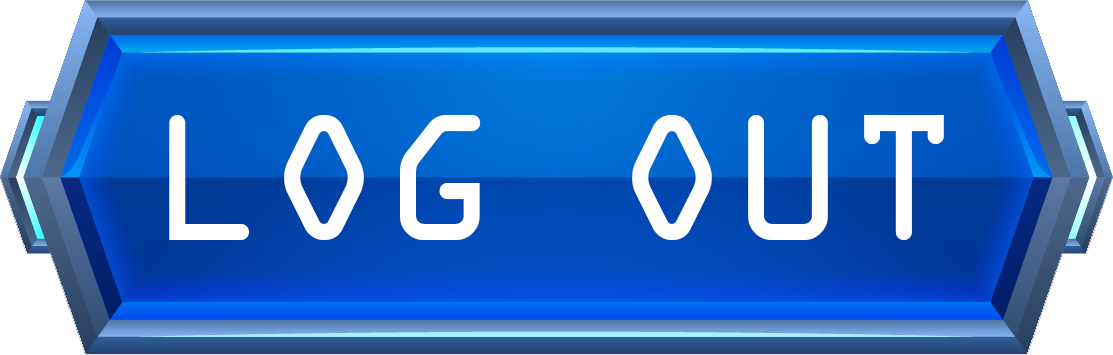
<style>
.page{position:relative;width:1113px;height:355px}
.page>*{position:absolute;margin:0}
.t1{font:192px "OCRAExtended";color:#ffffff}
</style>
<div class="page">
<p class="t1" style="left:169px;top:115px;width:775px;height:125px">LOG OUT</p>
</div>
